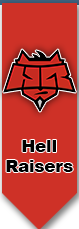
<style>
.page{position:relative;width:79px;height:229px;background:#ce3127}
.page>*{position:absolute;margin:0}
.t1{font:16.7px "Arial-Black";letter-spacing:-0.01em;color:#000000}
</style>
<div class="page">
<p class="t1" style="left:6px;top:140px;width:67px;height:32px">Hell<br>Raisers</p>
</div>
